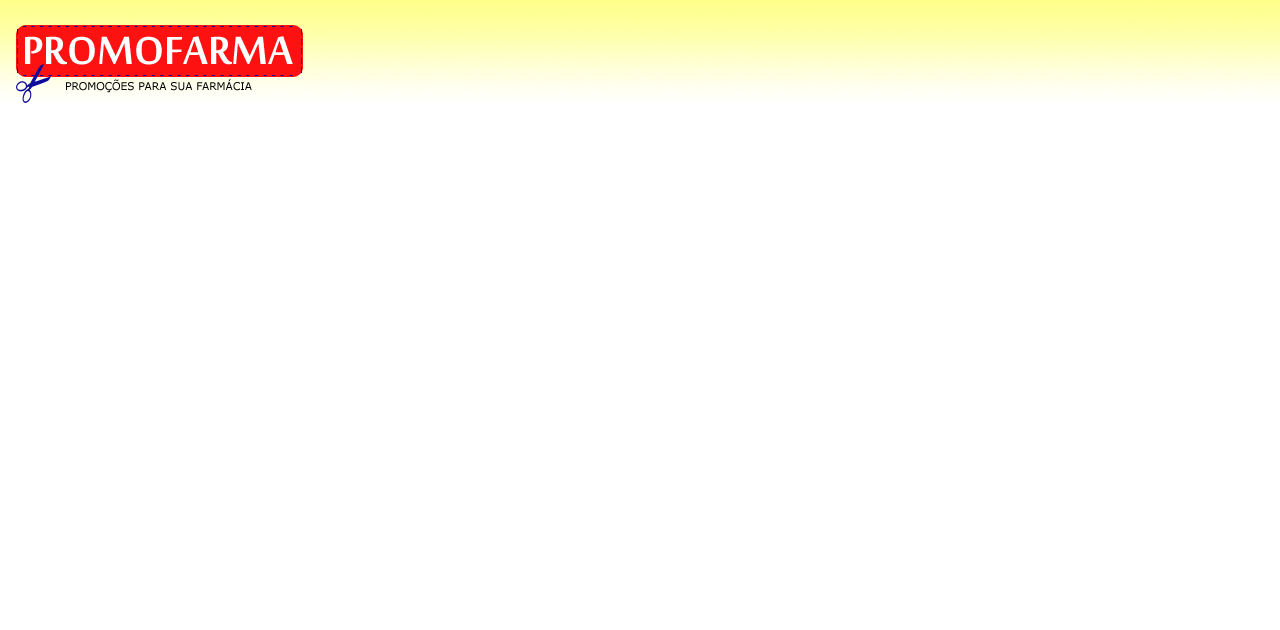
<style>
.page{position:relative;width:1280px;height:630px;background:#ffffff}
.page>*{position:absolute;margin:0}
.t1{font:8px "Verdana";color:#0d0a9d}
.t2{font:10.7px "Verdana";color:#0d0a9d}
.t3{font:60px "MoolBoran";color:#feffff}
.t4{font:10.7px "Verdana";color:#000000}
</style>
<div class="page">
<p class="t1" style="left:17px;top:29px;width:1px;height:44px">l<br>l<br>l<br>l<br>l</p>
<p class="t2" style="left:22px;top:26px;width:271px;height:1px">- - - - - - - - - - - - - - - - - - - - - - - - - - - - - - - -</p>
<p class="t1" style="left:301px;top:29px;width:1px;height:44px">l<br>l<br>l<br>l<br>l</p>
<p class="t3" style="left:25px;top:36px;width:268px;height:29px">PROMOFARMA</p>
<p class="t2" style="left:22px;top:75px;width:271px;height:1px">- - - - - - - - - - - - - - - - - - - - - - - - - - - - - - - -</p>
<p class="t4" style="left:66px;top:79px;width:186px;height:14px">PROMOÇÕES PARA SUA FARMÁCIA</p>
</div>
